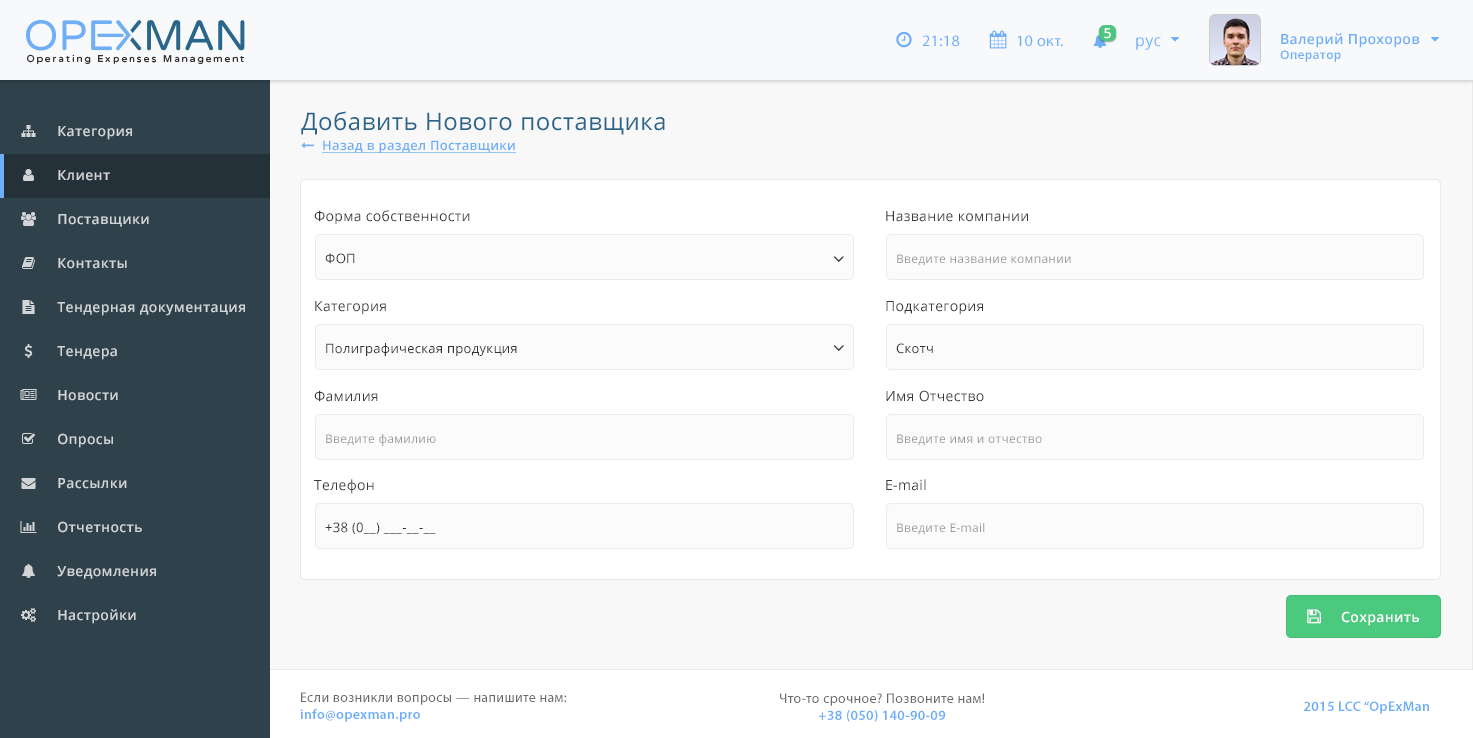
<style>
.page{position:relative;width:1473px;height:738px;background:#ffffff}
.page>*{position:absolute;margin:0}
.t1{font:13.9px "OpenSans-Semibold";letter-spacing:0.025em;color:#ffffff}
.t2{font:15.9px "MyriadPro-Regular";letter-spacing:0.025em;color:#6faff8}
.t3{font:15.9px "OpenSans";letter-spacing:0.025em;color:#6eaff8}
.t4{font:13.9px "OpenSans-Semibold";letter-spacing:0.025em;color:#6eaef7}
.t5{font:12px "OpenSans-Semibold";letter-spacing:0.025em;color:#6eaef7}
.t6{font:23.9px "OpenSans";letter-spacing:0.025em;color:#29658b}
.t7{font:13.9px "OpenSans-Semibold";letter-spacing:0.025em;color:#d2d5d7}
.t8{font:13px "OpenSans-Semibold";letter-spacing:0.025em;color:#6faff8;text-decoration:underline}
.t9{font:13.9px "OpenSans";letter-spacing:0.025em;color:#373838}
.t10{font:13px "OpenSans";letter-spacing:0.025em;color:#333333}
.t11{font:12px "OpenSans";letter-spacing:0.025em;color:#999999}
.t12{font:13.9px "MyriadPro-Regular";letter-spacing:0.025em;color:#696969}
.t13{font:13.9px "MyriadPro-Semibold";letter-spacing:0.025em;color:#6eaef8}
</style>
<div class="page">
<p class="t1" style="left:1104px;top:28px;width:7px;height:11px">5</p>
<p class="t2" style="left:922px;top:35px;width:38px;height:12px">21:18</p>
<p class="t2" style="left:1017px;top:35px;width:46px;height:12px">10 окт.</p>
<p class="t3" style="left:1136px;top:37px;width:25px;height:13px">рус</p>
<p class="t4" style="left:1280px;top:33px;width:140px;height:29px">Валерий Прохоров<br><span class="t5">Оператор</span></p>
<p class="t6" style="left:301px;top:111px;width:364px;height:24px">Добавить Нового поставщика</p>
<p class="t7" style="left:58px;top:126px;width:74px;height:14px">Категория</p>
<p class="t8" style="left:322px;top:140px;width:195px;height:13px">Назад в раздел Поставщики</p>
<p class="t7" style="left:58px;top:170px;width:52px;height:11px">Клиент</p>
<p class="t7" style="left:58px;top:214px;width:91px;height:13px">Поставщики</p>
<p class="t9" style="left:314px;top:210px;width:156px;height:15px">Форма собственности</p>
<p class="t9" style="left:886px;top:211px;width:142px;height:11px">Название компании</p>
<p class="t10" style="left:325px;top:253px;width:30px;height:11px">ФОП</p>
<p class="t11" style="left:897px;top:254px;width:174px;height:12px">Введите название компании</p>
<p class="t7" style="left:58px;top:258px;width:69px;height:11px">Контакты</p>
<p class="t7" style="left:57px;top:302px;width:188px;height:14px">Тендерная документация</p>
<p class="t9" style="left:315px;top:301px;width:71px;height:14px">Категория</p>
<p class="t9" style="left:886px;top:301px;width:97px;height:14px">Подкатегория</p>
<p class="t7" style="left:57px;top:346px;width:60px;height:14px">Тендера</p>
<p class="t10" style="left:326px;top:343px;width:191px;height:13px">Полиграфическая продукция</p>
<p class="t10" style="left:896px;top:343px;width:37px;height:11px">Скотч</p>
<p class="t7" style="left:58px;top:390px;width:60px;height:11px">Новости</p>
<p class="t9" style="left:314px;top:390px;width:64px;height:12px">Фамилия</p>
<p class="t9" style="left:886px;top:390px;width:98px;height:12px">Имя Отчество</p>
<p class="t7" style="left:58px;top:433px;width:55px;height:15px">Опросы</p>
<p class="t11" style="left:326px;top:434px;width:110px;height:12px">Введите фамилию</p>
<p class="t11" style="left:897px;top:434px;width:145px;height:12px">Введите имя и отчество</p>
<p class="t7" style="left:58px;top:478px;width:69px;height:11px">Рассылки</p>
<p class="t9" style="left:314px;top:479px;width:60px;height:15px">Телефон</p>
<p class="t9" style="left:886px;top:479px;width:40px;height:12px">E-mail</p>
<p class="t7" style="left:58px;top:521px;width:84px;height:12px">Отчетность</p>
<p class="t10" style="left:325px;top:522px;width:111px;height:12px">+38 (0__) ___-__-__</p>
<p class="t11" style="left:897px;top:523px;width:88px;height:12px">Введите E-mail</p>
<p class="t7" style="left:57px;top:566px;width:99px;height:13px">Уведомления</p>
<p class="t7" style="left:58px;top:609px;width:78px;height:15px">Настройки</p>
<p class="t1" style="left:1341px;top:611px;width:78px;height:15px">Сохранить</p>
<p class="t12" style="left:300px;top:692px;width:267px;height:30px">Если возникли вопросы — напишите нам:<br><span class="t13">info@opexman.pro</span></p>
<p class="t12" style="left:780px;top:693px;width:205px;height:29px;text-align:center">Что-то срочное? Позвоните нам!<br><span class="t13">+38 (050) 140-90-09</span></p>
<p class="t13" style="left:1304px;top:701px;width:125px;height:13px">2015 LCC “OpExMan</p>
</div>
